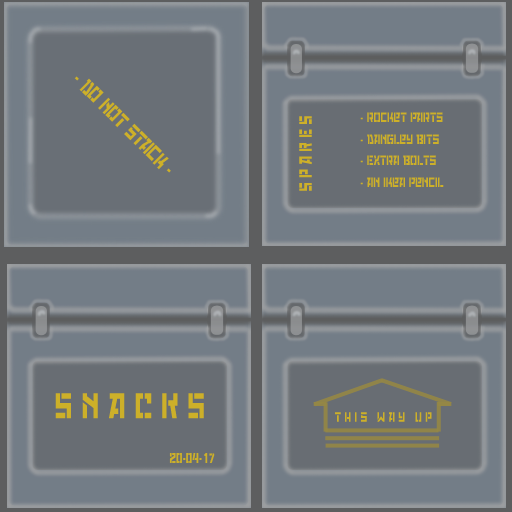
<style>
.page{position:relative;width:512px;height:512px;background:#737d87}
.page>*{position:absolute;margin:0}
.t1{font:18.2px "RedOctoberStencil";color:#cdb029;scale:0.77 1}
.t2{font:11.7px "RedOctoberStencil";color:#cdb029;scale:0.77 1}
.t3{font:15.6px "RedOctoberStencil";color:#cdb029;scale:0.77 1}
.t4{font:31.2px "RedOctoberStencil";color:#cdb029;scale:0.77 1}
</style>
<div class="page">
<p class="t1" style="left:74px;top:76px;width:97px;height:97px;rotate:45deg">- do not stack -</p>
<p class="t2" style="left:360px;top:112px;width:84px;height:75px">- rocket parts<br><br>- dangley bits<br><br>- Extra bolts<br><br>- an ikea pencil</p>
<p class="t3" style="left:299px;top:116px;width:13px;height:75px;rotate:-90deg">S P A R E S</p>
<p class="t4" style="left:55px;top:393px;width:149px;height:26px">S N A C K S</p>
<p class="t2" style="left:335px;top:412px;width:97px;height:10px">T h i s   W a y   U P</p>
<p class="t2" style="left:169px;top:453px;width:46px;height:10px">20-04-17</p>
</div>
